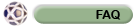
<style>
.page{position:relative;width:136px;height:28px;background:#ffffff}
.page>*{position:absolute;margin:0}
.t1{font:12px "ArialRoundedMTBold";color:#000000}
</style>
<div class="page">
<p class="t1" style="left:96px;top:10px;width:25px;height:10px">FAQ</p>
</div>
